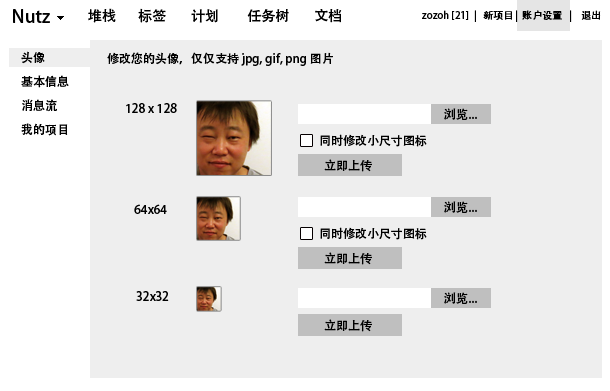
<style>
.page{position:relative;width:610px;height:391px;background:#eeeeee}
.page>*{position:absolute;margin:0}
.t1{font:18px "AdobeHeitiStd-Regular";color:#000000}
.t2{font:14px "AdobeHeitiStd-Regular";color:#000000}
.t3{font:10px "AdobeHeitiStd-Regular";color:#000000}
.t4{font:12px/24px "AdobeHeitiStd-Regular";color:#000000}
.t5{font:12px "AdobeHeitiStd-Regular";color:#000000}
</style>
<div class="page">
<p class="t1" style="left:13px;top:9px;width:37px;height:14px">Nutz</p>
<p class="t2" style="left:88px;top:8px;width:254px;height:15px">堆栈       标签        计划         任务树        文档</p>
<p class="t3" style="left:422px;top:10px;width:179px;height:12px">zozoh [21]  |   新项目 |  账户设置   |    退出</p>
<p class="t4" style="left:21px;top:51px;width:48px;height:85px">头像<br>基本信息<br>消息流<br>我的项目</p>
<p class="t5" style="left:107px;top:52px;width:226px;height:14px">修改您的头像，仅仅支持 jpg, gif, png 图片</p>
<p class="t5" style="left:126px;top:103px;width:51px;height:10px">128 x 128</p>
<p class="t5" style="left:444px;top:108px;width:33px;height:12px">浏览...</p>
<p class="t5" style="left:320px;top:134px;width:107px;height:13px">同时修改小尺寸图标</p>
<p class="t5" style="left:324px;top:159px;width:48px;height:13px">立即上传</p>
<p class="t5" style="left:134px;top:204px;width:33px;height:10px">64x64</p>
<p class="t5" style="left:444px;top:201px;width:33px;height:12px">浏览...</p>
<p class="t5" style="left:320px;top:227px;width:107px;height:13px">同时修改小尺寸图标</p>
<p class="t5" style="left:324px;top:252px;width:48px;height:13px">立即上传</p>
<p class="t5" style="left:136px;top:291px;width:33px;height:10px">32x32</p>
<p class="t5" style="left:444px;top:292px;width:33px;height:12px">浏览...</p>
<p class="t5" style="left:324px;top:319px;width:48px;height:13px">立即上传</p>
</div>
